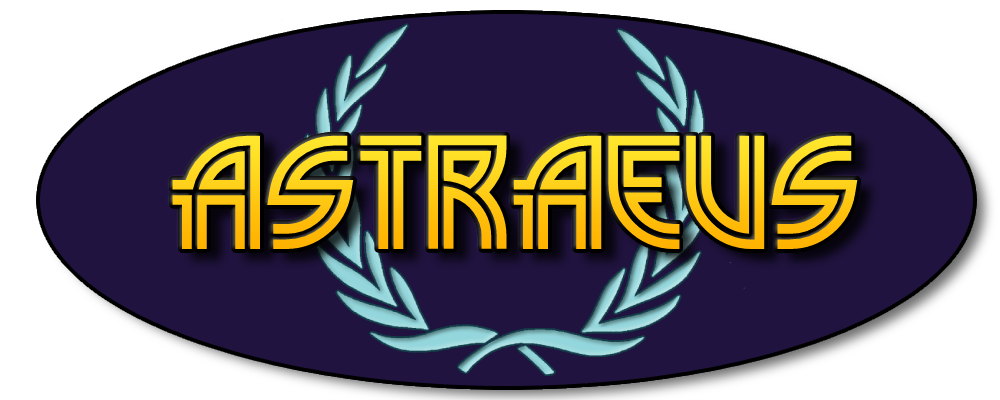
<style>
.page{position:relative;width:1000px;height:400px;background:#20133f}
.page>*{position:absolute;margin:0}
.t1{font:150px "MadisonSquareIncised"}
</style>
<div class="page">
<p class="t1" style="left:172px;top:135px;width:686px;height:114px">ASTRAEUS</p>
</div>
